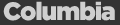
<style>
.page{position:relative;width:120px;height:25px;background:#333333}
.page>*{position:absolute;margin:0}
.t1{font:25px "GothamBlack";letter-spacing:-0.05em;color:#cfcfcf}
</style>
<div class="page">
<p class="t1" style="left:3px;top:1px;width:112px;height:20px">Columbia</p>
</div>
